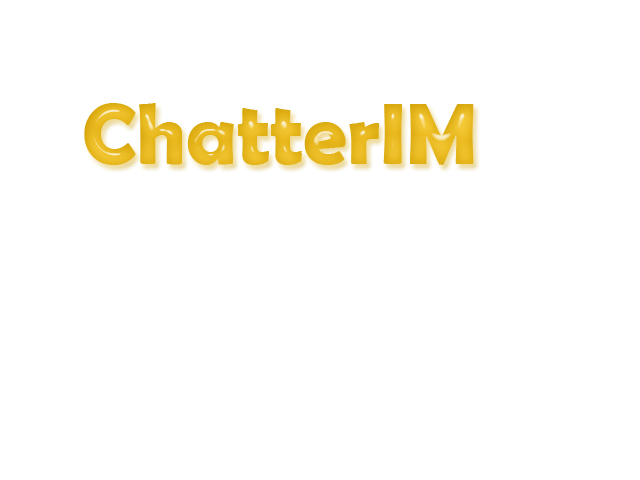
<style>
.page{position:relative;width:640px;height:480px;background:#ffffff}
.page>*{position:absolute;margin:0}
.t1{font:87.2px "BerlinSansFBDemi-Bold";color:#e7b81f}
</style>
<div class="page">
<p class="t1" style="left:84px;top:103px;width:390px;height:62px">ChatterIM</p>
</div>
